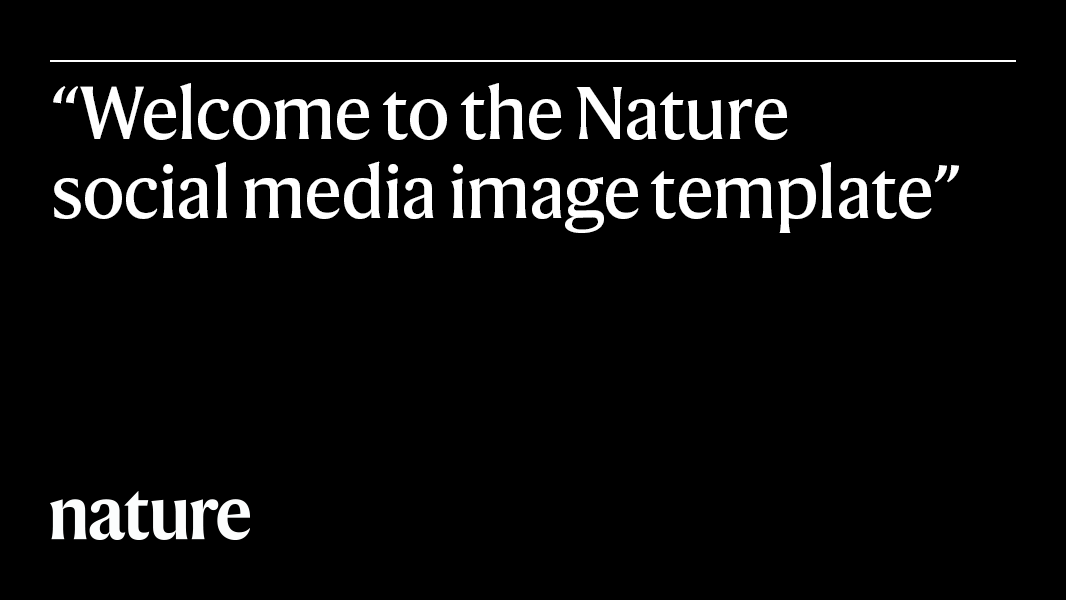
<style>
.page{position:relative;width:1066px;height:600px;background:#000000}
.page>*{position:absolute;margin:0}
.t1{font:12px "MyriadPro-Regular";color:#ffffff}
</style>
<div class="page">
<p class="t1" style="left:53px;top:83px;width:906px;height:150px">“Welcome to the Nature<br>social media image template”</p>
</div>
